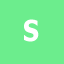
<style>
.page{position:relative;width:64px;height:64px;background:#6ced8d}
.page>*{position:absolute;margin:0}
.t1{font:28.7px "Tahoma-Bold";letter-spacing:0.105em;color:#ffffff;scale:0.87 1}
</style>
<div class="page">
<p class="t1" style="left:24px;top:19px;width:15px;height:23px">S</p>
</div>
